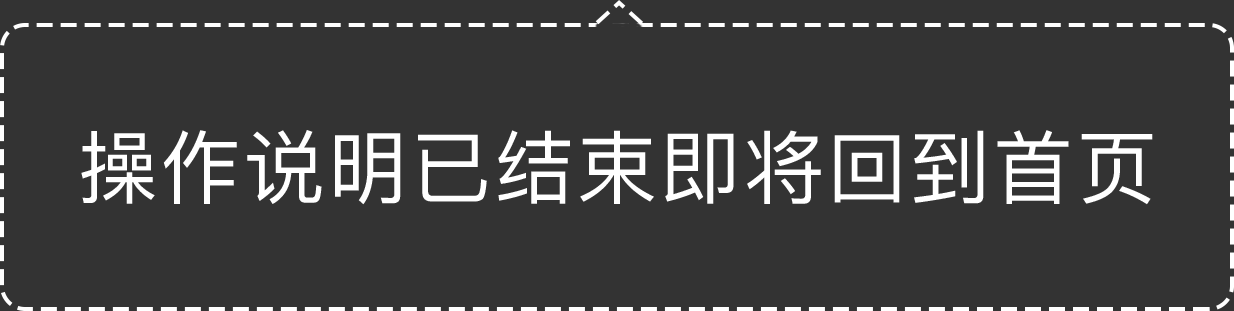
<style>
.page{position:relative;width:1234px;height:311px;background:#333333}
.page>*{position:absolute;margin:0}
.t1{font:80px "PingFang-SC-Medium";letter-spacing:0.04em;color:#ffffff;text-transform:uppercase}
</style>
<div class="page">
<p class="t1" style="left:81px;top:130px;width:1072px;height:75px">操作说明已结束即将回到首页</p>
</div>
